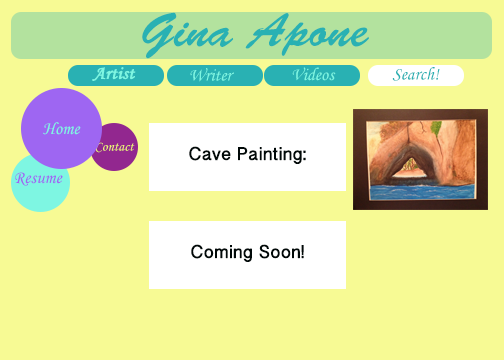
<style>
.page{position:relative;width:504px;height:360px;background:#f7fa94}
.page>*{position:absolute;margin:0}
.t1{font:48px "BrushScriptStd";color:#29b1b3}
.t2{font:18px "MonotypeCorsiva";color:#7ef6e2;font-weight:bold}
.t3{font:18px "MonotypeCorsiva";color:#7ef6e2}
.t4{font:18px "MonotypeCorsiva";color:#29b1b3}
.t5{font:14px "MonotypeCorsiva";color:#eef275}
.t6{font:18px "BanglaSangamMN";color:#010908;font-weight:bold}
.t7{font:18px "MonotypeCorsiva";color:#9e66f2}
</style>
<div class="page">
<p class="t1" style="left:142px;top:12px;width:227px;height:47px">Gina Apone</p>
<p class="t2" style="left:92px;top:67px;width:44px;height:14px">Artist</p>
<p class="t3" style="left:190px;top:68px;width:44px;height:14px">Writer</p>
<p class="t3" style="left:292px;top:67px;width:44px;height:14px">Videos</p>
<p class="t4" style="left:392px;top:67px;width:48px;height:14px">Search!</p>
<p class="t3" style="left:43px;top:122px;width:38px;height:13px">Home</p>
<p class="t5" style="left:95px;top:142px;width:40px;height:11px">Contact</p>
<p class="t6" style="left:189px;top:146px;width:117px;height:18px">Cave Painting:</p>
<p class="t7" style="left:15px;top:172px;width:48px;height:14px">Resume</p>
<p class="t6" style="left:191px;top:244px;width:113px;height:18px">Coming Soon!</p>
</div>
